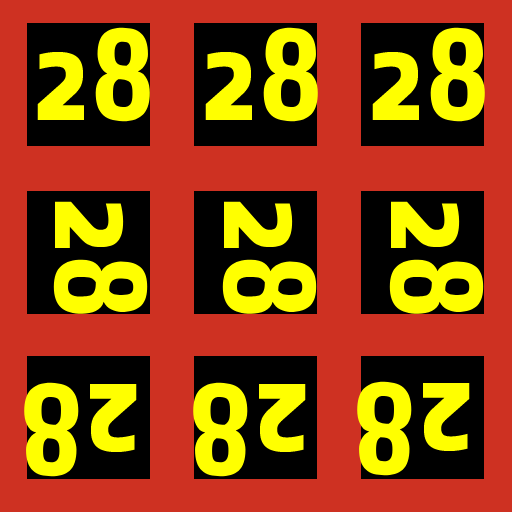
<style>
.page{position:relative;width:512px;height:512px;background:#ce3122}
.page>*{position:absolute;margin:0}
.t1{font:130px "Share-BoldOSF";color:#ffff00}
</style>
<div class="page">
<p class="t1" style="left:37px;top:27px;width:113px;height:95px">28</p>
<p class="t1" style="left:205px;top:27px;width:113px;height:95px">28</p>
<p class="t1" style="left:372px;top:27px;width:113px;height:95px">28</p>
<p class="t1" style="left:53px;top:201px;width:95px;height:113px;rotate:90deg">28</p>
<p class="t1" style="left:222px;top:201px;width:95px;height:113px;rotate:90deg">28</p>
<p class="t1" style="left:389px;top:201px;width:95px;height:113px;rotate:90deg">28</p>
<p class="t1" style="left:24px;top:382px;width:113px;height:95px;rotate:-180deg">28</p>
<p class="t1" style="left:193px;top:382px;width:113px;height:95px;rotate:-180deg">28</p>
<p class="t1" style="left:357px;top:381px;width:113px;height:95px;rotate:-180deg">28</p>
</div>
